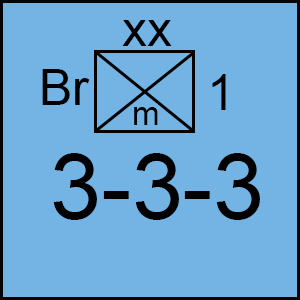
<style>
.page{position:relative;width:300px;height:300px;background:#74b4e4}
.page>*{position:absolute;margin:0}
.t1{font:50px "ArialMT";color:#000000}
.t2{font:33.3px "ArialMT";color:#000000}
.t3{font:91.7px "ArialMT";color:#000000}
</style>
<div class="page">
<p class="t1" style="left:122px;top:20px;width:50px;height:26px">xx</p>
<p class="t1" style="left:42px;top:69px;width:48px;height:36px">Br</p>
<p class="t1" style="left:212px;top:74px;width:14px;height:36px">1</p>
<p class="t2" style="left:134px;top:107px;width:24px;height:18px">m</p>
<p class="t3" style="left:53px;top:153px;width:207px;height:67px">3-3-3</p>
</div>
